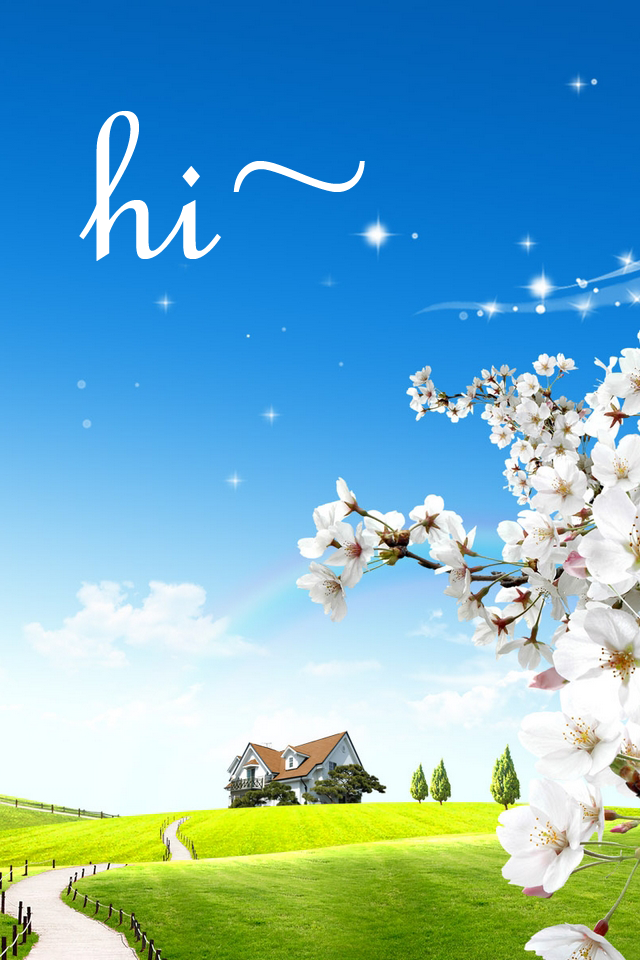
<style>
.page{position:relative;width:640px;height:960px}
.page>*{position:absolute;margin:0}
.t1{font:250px "FrenchScriptMT";color:#ffffff}
</style>
<div class="page">
<p class="t1" style="left:79px;top:110px;width:286px;height:151px">hi~</p>
</div>
